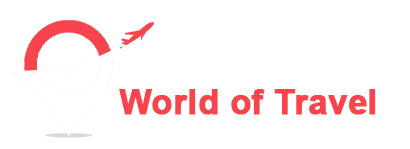
<style>
.page{position:relative;width:410px;height:149px;background:#ffffff}
.page>*{position:absolute;margin:0}
.t1{font:34px "Arial-BoldMT";color:#f8454d;font-weight:bold}
.t2{font:31px "ArialMT";letter-spacing:0.05em;color:#ffffff;font-weight:bold}
</style>
<div class="page">
<p class="t1" style="left:119px;top:51px;width:257px;height:64px"><span class="t2">Limitless<br></span>World of Travel</p>
</div>
